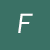
<style>
.page{position:relative;width:50px;height:50px;background:#3a7165}
.page>*{position:absolute;margin:0}
.t1{font:27.8px "Bellota-BoldItalic";color:#ffffff}
</style>
<div class="page">
<p class="t1" style="left:18px;top:13px;width:15px;height:20px">F</p>
</div>
